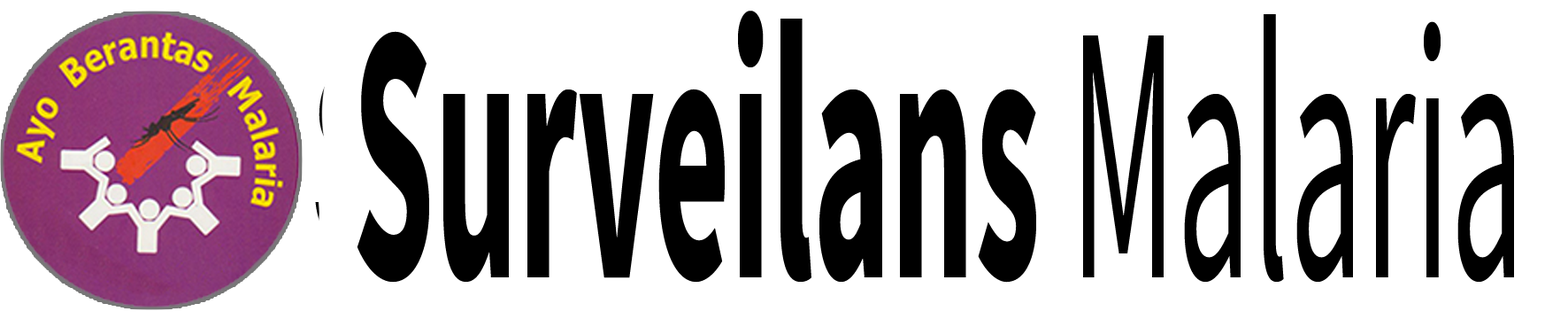
<style>
.page{position:relative;width:1568px;height:319px;background:#ffffff}
.page>*{position:absolute;margin:0}
.t1{font:368.7px "SourceSansPro-Bold";color:#000000;scale:0.4 1}
.t2{font:368.7px "SourceSansPro-Regular";color:#000000;scale:0.4 1}
</style>
<div class="page">
<p class="t1" style="left:357px;top:11px;width:1157px;height:271px">Surveilans<span class="t2"> Malaria</span></p>
</div>
